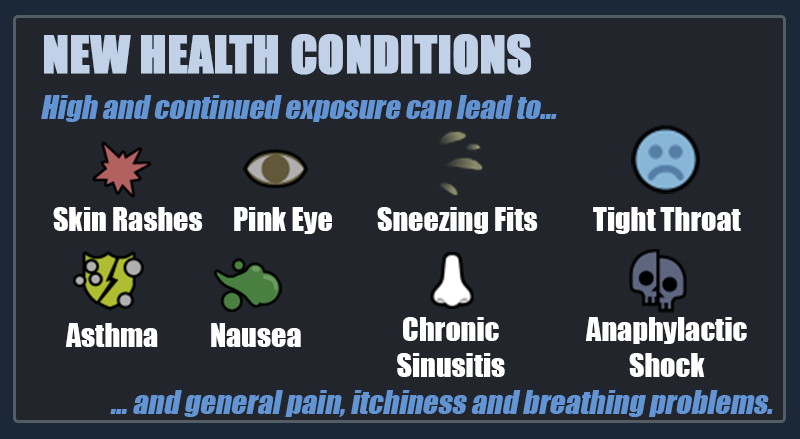
<style>
.page{position:relative;width:800px;height:439px;background:#22262c}
.page>*{position:absolute;margin:0}
.t1{font:47.5px "Impact";color:#c1d2e8;text-transform:uppercase;font-weight:bold}
.t2{font:30px "Impact";color:#6394d4;font-style:italic}
.t3{font:30px "Impact";color:#ffffff}
</style>
<div class="page">
<p class="t1" style="left:44px;top:34px;width:487px;height:41px">New health conditions</p>
<p class="t2" style="left:41px;top:95px;width:516px;height:27px">High and continued exposure can lead to...</p>
<p class="t3" style="left:53px;top:207px;width:688px;height:27px">Skin Rashes Pink Eye  Sneezing Fits  Tight Throat</p>
<p class="t3" style="left:397px;top:317px;width:108px;height:60px;text-align:center">Chronic<br>Sinusitis</p>
<p class="t3" style="left:585px;top:317px;width:162px;height:60px;text-align:center">Anaphylactic<br>Shock</p>
<p class="t3" style="left:65px;top:323px;width:236px;height:24px">Asthma  Nausea</p>
<p class="t2" style="left:110px;top:390px;width:663px;height:27px">... and general pain, itchiness and breathing problems.</p>
</div>
